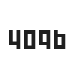
<style>
.page{position:relative;width:74px;height:74px;background:#ffffff}
.page>*{position:absolute;margin:0}
.t1{font:30px "04b24";color:#1f1f1f}
</style>
<div class="page">
<p class="t1" style="left:9px;top:30px;width:57px;height:19px">4096</p>
</div>
